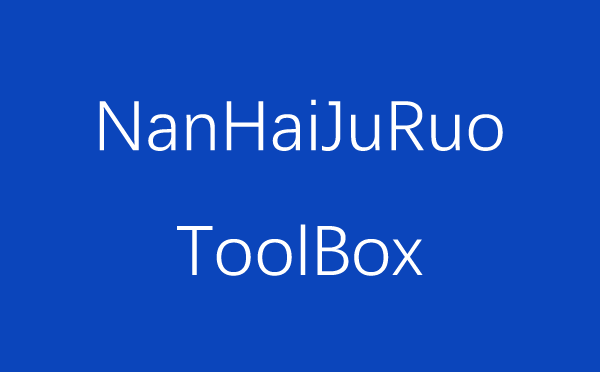
<style>
.page{position:relative;width:600px;height:372px;background:#0b45bb}
.page>*{position:absolute;margin:0}
.t1{font:71.3px "DengXian";color:#ffffff}
</style>
<div class="page">
<p class="t1" style="left:99px;top:99px;width:404px;height:177px;text-align:center">NanHaiJuRuo<br>ToolBox</p>
</div>
